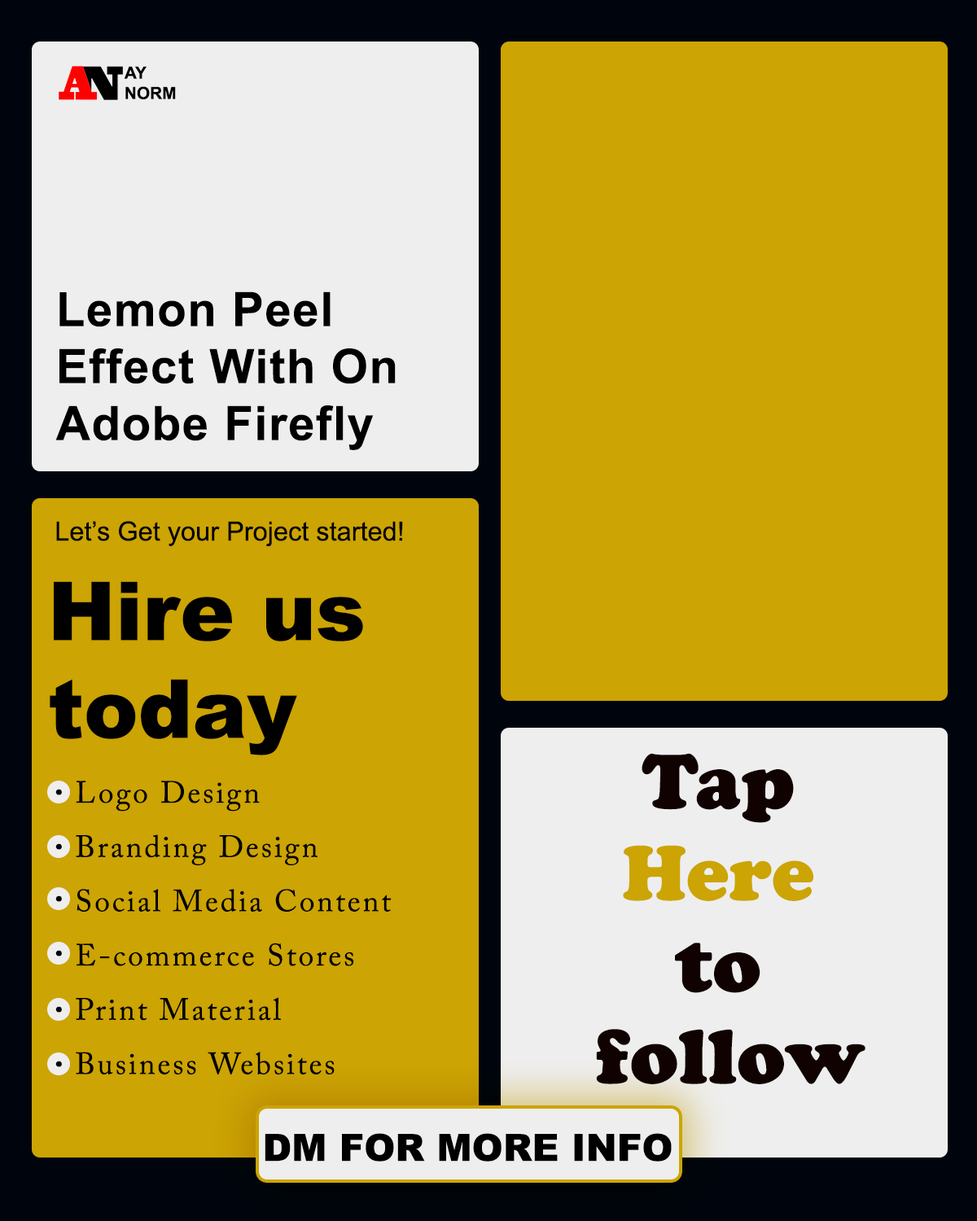
<style>
.page{position:relative;width:977px;height:1221px;background:#cca403}
.page>*{position:absolute;margin:0}
.t1{font:17px "Arial-BoldMT";color:#000000}
.t2{font:47.5px "Arial-BoldMT";letter-spacing:0.025em;color:#000000}
.t3{font:26.5px "ArialMT";color:#000000}
.t4{font:81.4px "Arial-Black";color:#000000}
.t5{font:76.3px "CooperBlackStd";color:#110202}
.t6{font:76.3px "CooperBlackStd";color:#cca403}
.t7{font:30.5px/54.3px "ACaslonPro-Regular";letter-spacing:0.075em;color:#000000}
.t8{font:37.3px "Arial-Black";color:#000000}
</style>
<div class="page">
<p class="t1" style="left:124px;top:66px;width:52px;height:33px">AY<br>NORM</p>
<p class="t2" style="left:55px;top:291px;width:341px;height:159px">Lemon Peel<br>Effect With On<br>Adobe Firefly</p>
<p class="t3" style="left:56px;top:521px;width:347px;height:25px">Let’s Get your Project started!</p>
<p class="t4" style="left:50px;top:581px;width:313px;height:174px">Hire us <br>today</p>
<p class="t5" style="left:596px;top:753px;width:269px;height:331px;text-align:center">Tap <br><span class="t6">Here</span> <br>to <br>follow</p>
<p class="t7" style="left:76px;top:781px;width:315px;height:294px">Logo Design<br>Branding Design<br>Social Media Content<br>E-commerce Stores<br>Print Material<br>Business Websites</p>
<p class="t8" style="left:265px;top:1133px;width:406px;height:28px">DM FOR MORE INFO</p>
</div>
